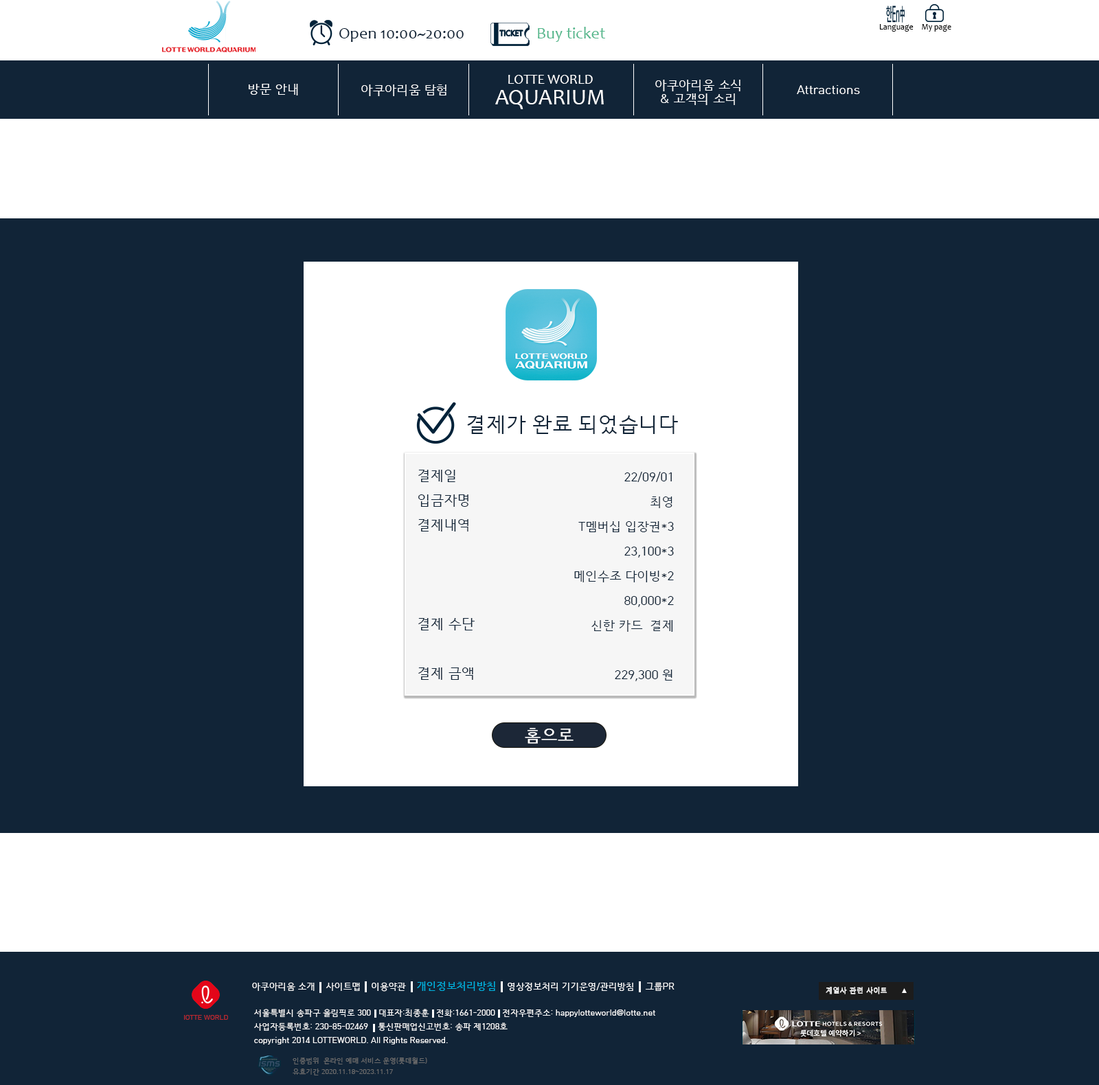
<style>
.page{position:relative;width:1099px;height:1085px;background:#112437}
.page>*{position:absolute;margin:0}
.t1{font:16.5px "Candara";color:#112437}
.t2{font:16.5px "Candara";color:#54b78c}
.t3{font:8.2px "Candara";color:#000000}
.t4{font:13.7px/20.6px "Candara";color:#ffffff}
.t5{font:22px/20.6px "Candara";color:#ffffff}
.t6{font:12.4px "HCRDotum";color:#ffffff}
.t7{font:12.4px/13.7px "HCRDotum";color:#ffffff}
.t8{font:20.6px "HCRDotum";color:#112437}
.t9{font:13.7px/24.7px "HCRDotum";color:#112437}
.t10{font:12.4px/24.7px "HCRDotum";color:#112437}
.t11{font:16.5px "HCRDotum";color:#ffffff;font-weight:bold}
.t12{font:8.9px "HCRDotum";color:#ffffff}
.t13{font:10.3px "HCRDotum";color:#00b2df}
.t14{font:6.9px "MalgunGothic";color:#ffffff;font-weight:bold}
.t15{font:8.2px/13.7px "HCRDotum";color:#ffffff}
.t16{font:6.9px "HCRDotum";color:#c1282e}
.t17{font:6.9px/11px "HCRDotum";color:#6c6c6c}
</style>
<div class="page">
<p class="t1" style="left:339px;top:27px;width:266px;height:15px">Open 10:00~20:00   <span class="t2">Buy ticket</span></p>
<p class="t3" style="left:880px;top:24px;width:71px;height:8px">Language My page</p>
<p class="t4" style="left:495px;top:75px;width:109px;height:34px;text-align:center">LOTTE WORLD<br><span class="t5">AQUARIUM</span></p>
<p class="t6" style="left:249px;top:84px;width:49px;height:11px">방문 안내</p>
<p class="t6" style="left:361px;top:84px;width:85px;height:12px">아쿠아리움 탐험</p>
<p class="t7" style="left:655px;top:80px;width:85px;height:25px;text-align:center">아쿠아리움 소식<br>&amp; 고객의 소리</p>
<p class="t6" style="left:797px;top:85px;width:63px;height:9px">Attractions</p>
<p class="t8" style="left:467px;top:416px;width:211px;height:18px">결제가 완료 되었습니다</p>
<p class="t9" style="left:418px;top:470px;width:57px;height:210px">결제일<br>입금자명<br>결제내역<br><br><br><br>결제 수단<br><br>결제 금액</p>
<p class="t10" style="left:574px;top:472px;width:100px;height:209px;text-align:right">22/09/01<br>최영<br>T멤버십 입장권*3<br>23,100*3<br>메인수조 다이빙*2<br>80,000*2<br>신한 카드  결제<br><br>229,300 원</p>
<p class="t11" style="left:525px;top:728px;width:48px;height:16px">홈으로</p>
<p class="t12" style="left:252px;top:981px;width:422px;height:11px">아쿠아리움 소개    사이트맵    이용약관    <span class="t13">개인정보처리방침</span>    영상정보처리 기기운영/관리방침    그룹PR</p>
<p class="t14" style="left:826px;top:987px;width:61px;height:7px">계열사 관련 사이트</p>
<p class="t15" style="left:254px;top:1009px;width:401px;height:36px">서울특별시 송파구 올림픽로 300   대표자:최종훈   전화:1661-2000   전자우편주소: happylotteworld@lotte.net<br>사업자등록번호: 230-85-02469    통신판매업신고번호: 송파 제1208호<br>copyright 2014 LOTTEWORLD. All Rights Reserved.</p>
<p class="t16" style="left:184px;top:1015px;width:44px;height:5px">lOTTE WORLD</p>
<p class="t17" style="left:293px;top:1057px;width:134px;height:19px">인증범위  온라인 예매 서비스 운영(롯데월드)<br>유효기간 2020.11.18~2023.11.17</p>
</div>
